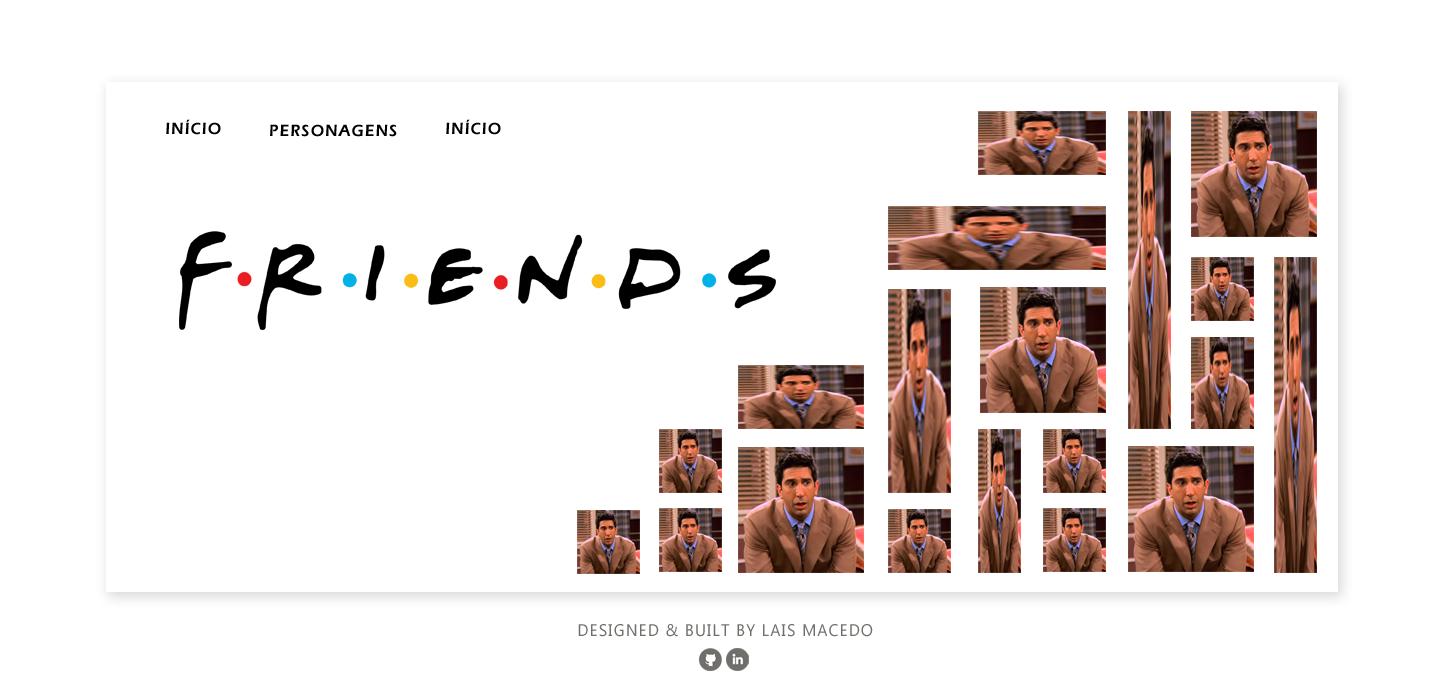
<style>
.page{position:relative;width:1440px;height:694px;background:#ffffff}
.page>*{position:absolute;margin:0}
.t1{font:16.7px "ErasITC-Demi";letter-spacing:0.08em;color:#000000;scale:0.94 1}
.t2{font:16.7px "Gadugi";letter-spacing:0.08em;color:#706f6b;text-transform:uppercase;scale:0.94 1}
</style>
<div class="page">
<p class="t1" style="left:166px;top:119px;width:55px;height:16px">INÍCIO</p>
<p class="t1" style="left:270px;top:124px;width:127px;height:13px">PERSONAGENS</p>
<p class="t1" style="left:446px;top:119px;width:55px;height:16px">INÍCIO</p>
<p class="t2" style="left:578px;top:624px;width:295px;height:13px">Designed &amp; Built by Lais Macedo</p>
</div>
